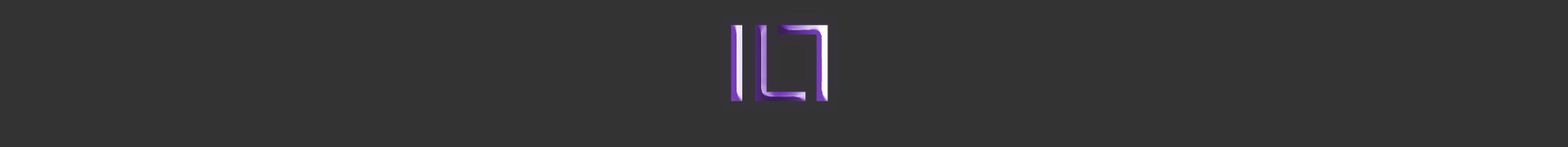
<style>
.page{position:relative;width:1568px;height:147px;background:#333333}
.page>*{position:absolute;margin:0}
.t1{font:108.8px "VanBerger-Stencil";scale:1.2 1}
</style>
<div class="page">
<p class="t1" style="left:731px;top:25px;width:97px;height:76px">IO</p>
</div>
